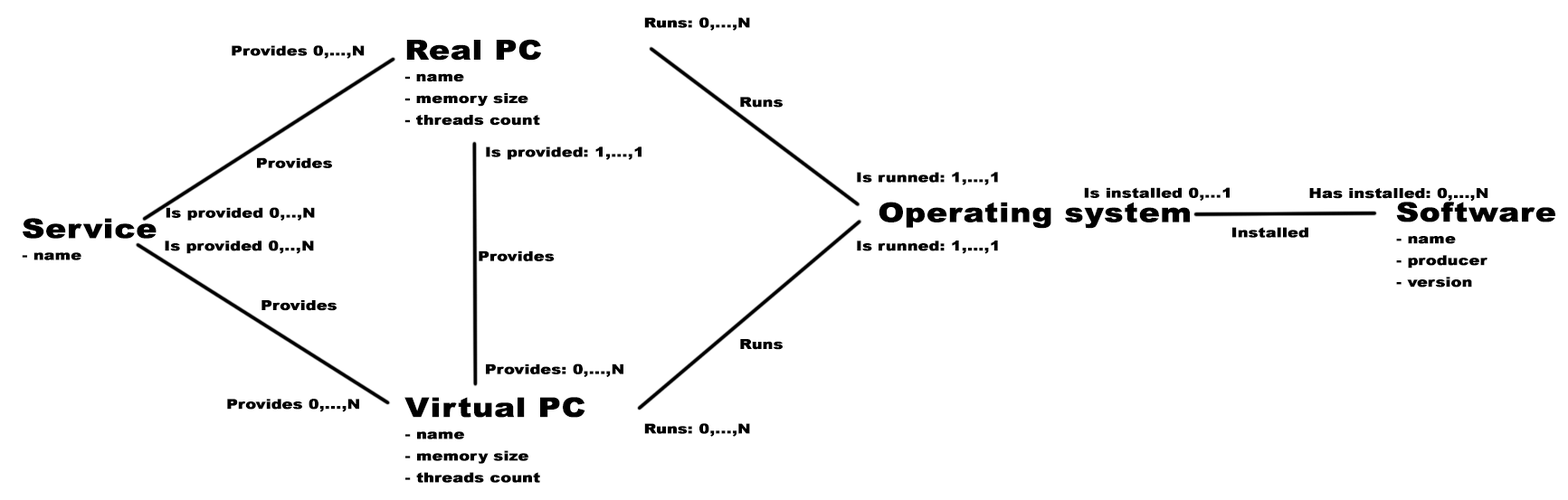
<style>
.page{position:relative;width:1568px;height:500px;background:#ffffff}
.page>*{position:absolute;margin:0}
.t1{font:13.6px "Arial-Black";color:#000000;font-weight:bold;scale:1.15 1}
.t2{font:27.1px "Arial-Black";color:#000000;font-weight:bold;scale:1.15 1}
</style>
<div class="page">
<p class="t1" style="left:644px;top:17px;width:106px;height:14px">Runs: 0,...,N</p>
<p class="t1" style="left:404px;top:39px;width:137px;height:87px"><span class="t2">Real PC<br></span>- name<br>- memory size<br>- threads count</p>
<p class="t1" style="left:232px;top:45px;width:133px;height:14px">Provides 0,...,N</p>
<p class="t1" style="left:740px;top:97px;width:43px;height:11px">Runs</p>
<p class="t1" style="left:486px;top:147px;width:155px;height:13px">Is provided: 1,...,1</p>
<p class="t1" style="left:257px;top:157px;width:75px;height:11px">Provides</p>
<p class="t1" style="left:857px;top:172px;width:141px;height:13px">Is runned: 1,...,1</p>
<p class="t1" style="left:1084px;top:187px;width:146px;height:14px">Is installed 0,...1</p>
<p class="t1" style="left:1309px;top:187px;width:179px;height:15px">Has installed: 0,...,N</p>
<p class="t1" style="left:166px;top:207px;width:149px;height:14px">Is provided 0,..,N</p>
<p class="t2" style="left:879px;top:202px;width:311px;height:27px">Operating system</p>
<p class="t1" style="left:1396px;top:202px;width:159px;height:86px"><span class="t2">Software<br></span>- name<br>- producer<br>- version</p>
<p class="t2" style="left:22px;top:218px;width:135px;height:43px">Service<br><span class="t1">- name</span></p>
<p class="t1" style="left:1232px;top:227px;width:76px;height:11px">Installed</p>
<p class="t1" style="left:165px;top:241px;width:149px;height:13px">Is provided 0,..,N</p>
<p class="t1" style="left:857px;top:241px;width:141px;height:13px">Is runned: 1,...,1</p>
<p class="t1" style="left:479px;top:251px;width:76px;height:10px">Provides</p>
<p class="t1" style="left:261px;top:300px;width:76px;height:11px">Provides</p>
<p class="t1" style="left:740px;top:339px;width:43px;height:11px">Runs</p>
<p class="t1" style="left:486px;top:364px;width:137px;height:13px">Provides: 0,...,N</p>
<p class="t1" style="left:227px;top:399px;width:132px;height:14px">Provides 0,...,N</p>
<p class="t1" style="left:404px;top:397px;width:181px;height:86px"><span class="t2">Virtual PC<br></span>- name<br>- memory size<br>- threads count</p>
<p class="t1" style="left:644px;top:423px;width:106px;height:14px">Runs: 0,...,N</p>
</div>
